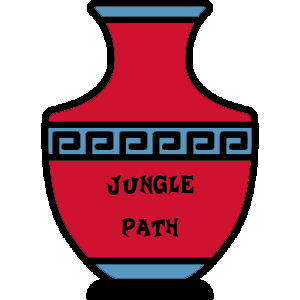
<style>
.page{position:relative;width:300px;height:300px;background:#ffffff}
.page>*{position:absolute;margin:0}
.t1{font:36px "Crash-a-Like";color:#000000}
</style>
<div class="page">
<p class="t1" style="left:106px;top:175px;width:88px;height:62px;text-align:center">Jungle<br>Path</p>
</div>
